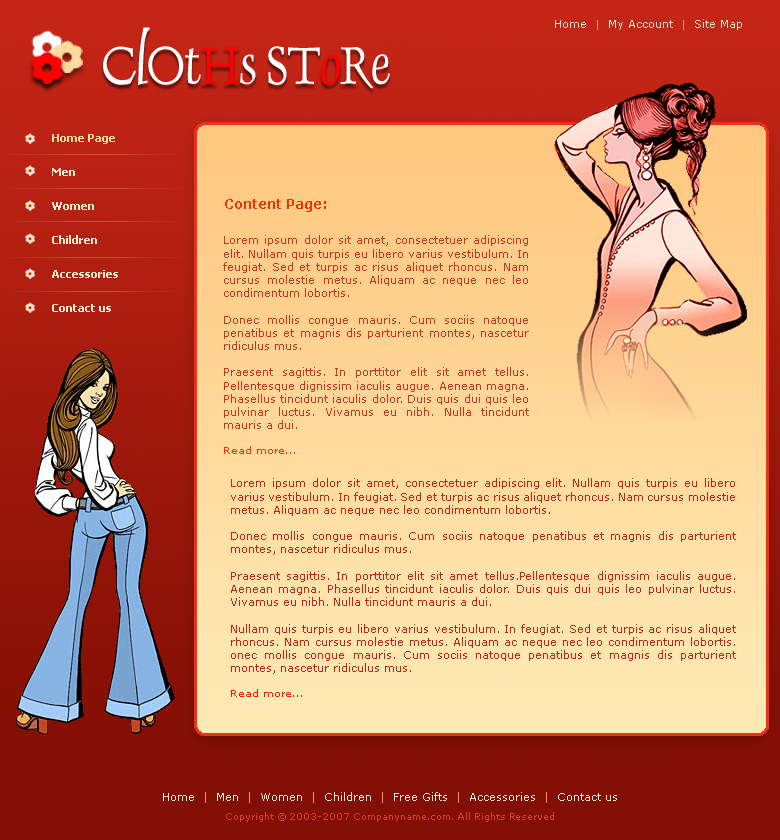
<style>
.page{position:relative;width:780px;height:840px}
.page>*{position:absolute;margin:0}
.t1{font:60.5px "DauphinPlain";letter-spacing:-0.025em;color:#ffffff;scale:0.91 1}
.t2{font:60.5px "DauphinPlain";letter-spacing:-0.025em;color:#ff0000;scale:0.91 1}
.t3{font:11px "Verdana";color:#fce8cd}
.t4{font:9px "Verdana";color:#ff9288}
.t5{font:11px/17px "Tahoma-Bold";color:#ffeace}
.t6{font:11px/17px "Tahoma-Bold";color:#ffda9d}
.t7{font:14.3px "Verdana-Bold";color:#f03203;scale:0.91 1}
.t8{font:11px "Verdana";color:#c12415}
.t9{font:10px "Verdana";color:#ff1700}
.t10{font:9px/19px "Verdana";color:#d94031}
.t11{font:11px/19px "Verdana";color:#ffeace}
.t12{font:11px/19px "Verdana";color:#fc8579}
</style>
<div class="page">
<p class="t1" style="left:103px;top:27px;width:287px;height:62px">ClOt<span class="t2">H</span>s ST<span class="t2">o</span>Re</p>
<p class="t3" style="left:555px;top:19px;width:187px;height:11px">Home  <span class="t4">|</span>  My Account  <span class="t4">|</span>  Site Map</p>
<p class="t5" style="left:52px;top:134px;width:66px;height:178px"><span class="t6">Home Page<br><br></span>Men<br><br>Women<br><br>Children<br><br>Accessories<br><br>Contact us</p>
<p class="t7" style="left:225px;top:199px;width:101px;height:13px">Content Page:</p>
<p class="t8" style="left:223px;top:235px;width:306px;height:219px;text-align:justify;opacity:0.9">Lorem ipsum dolor sit amet, consectetuer adipiscing elit. Nullam quis turpis eu libero varius vestibulum. In feugiat. Sed et turpis ac risus aliquet rhoncus. Nam cursus molestie metus. Aliquam ac neque nec leo condimentum lobortis. <br><br>Donec mollis congue mauris. Cum sociis natoque penatibus et magnis dis parturient montes, nascetur ridiculus mus.<br><br>Praesent sagittis. In porttitor elit sit amet tellus.Pellentesque dignissim iaculis augue. Aenean magna. Phasellus tincidunt iaculis dolor. Duis quis dui quis leo pulvinar luctus. Vivamus eu nibh. Nulla tincidunt mauris a dui.<br><br><span class="t9">Read more...</span></p>
<p class="t8" style="left:231px;top:478px;width:505px;height:219px;text-align:justify">Lorem ipsum dolor sit amet, consectetuer adipiscing elit. Nullam quis turpis eu libero varius vestibulum. In feugiat. Sed et turpis ac risus aliquet rhoncus. Nam cursus molestie metus. Aliquam ac neque nec leo condimentum lobortis. <br><br>Donec mollis congue mauris. Cum sociis natoque penatibus et magnis dis parturient montes, nascetur ridiculus mus.<br><br>Praesent sagittis. In porttitor elit sit amet tellus.Pellentesque dignissim iaculis augue. Aenean magna. Phasellus tincidunt iaculis dolor. Duis quis dui quis leo pulvinar luctus. Vivamus eu nibh. Nulla tincidunt mauris a dui.<br><br>Nullam quis turpis eu libero varius vestibulum. In feugiat. Sed et turpis ac risus aliquet rhoncus. Nam cursus molestie metus. Aliquam ac neque nec leo condimentum lobortis.onec mollis congue mauris. Cum sociis natoque penatibus et magnis dis parturient montes, nascetur ridiculus mus.<br><br><span class="t9">Read more...</span></p>
<p class="t10" style="left:163px;top:792px;width:454px;height:30px;text-align:center"><span class="t11">Home  </span><span class="t12">|</span><span class="t11">  Men  </span><span class="t12">| </span><span class="t11"> Women  </span><span class="t12">|</span><span class="t11">  Children  </span><span class="t12">|</span><span class="t11">  Free Gifts  </span><span class="t12">|</span><span class="t11">  Accessories  </span><span class="t12">|</span><span class="t11">  Contact us<br></span>Copyright © 2003-2007 Companyname.com. All Rights Reserved</p>
</div>
